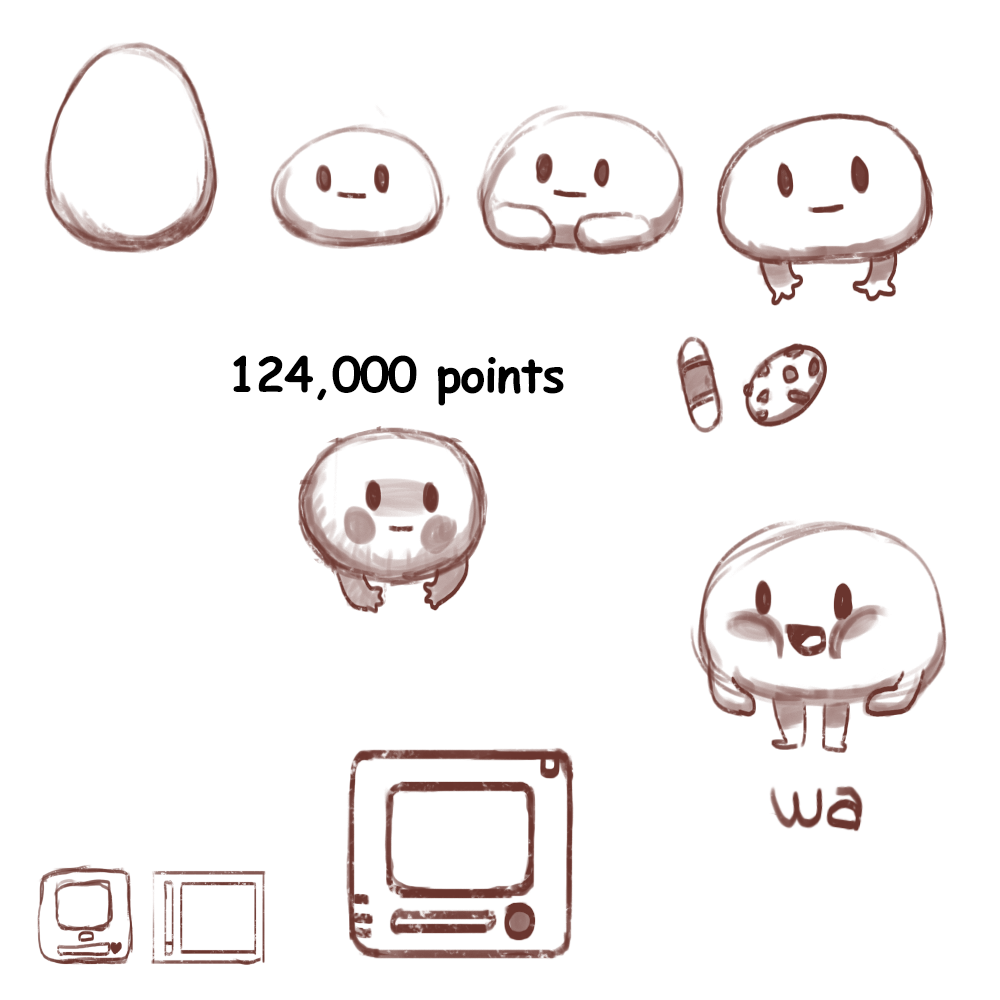
<style>
.page{position:relative;width:1000px;height:1000px;background:#ffffff}
.page>*{position:absolute;margin:0}
.t1{font:48px "ComicSansMS-Bold";letter-spacing:-0.025em;color:#000000}
</style>
<div class="page">
<p class="t1" style="left:233px;top:355px;width:331px;height:51px">124,000 points</p>
</div>
